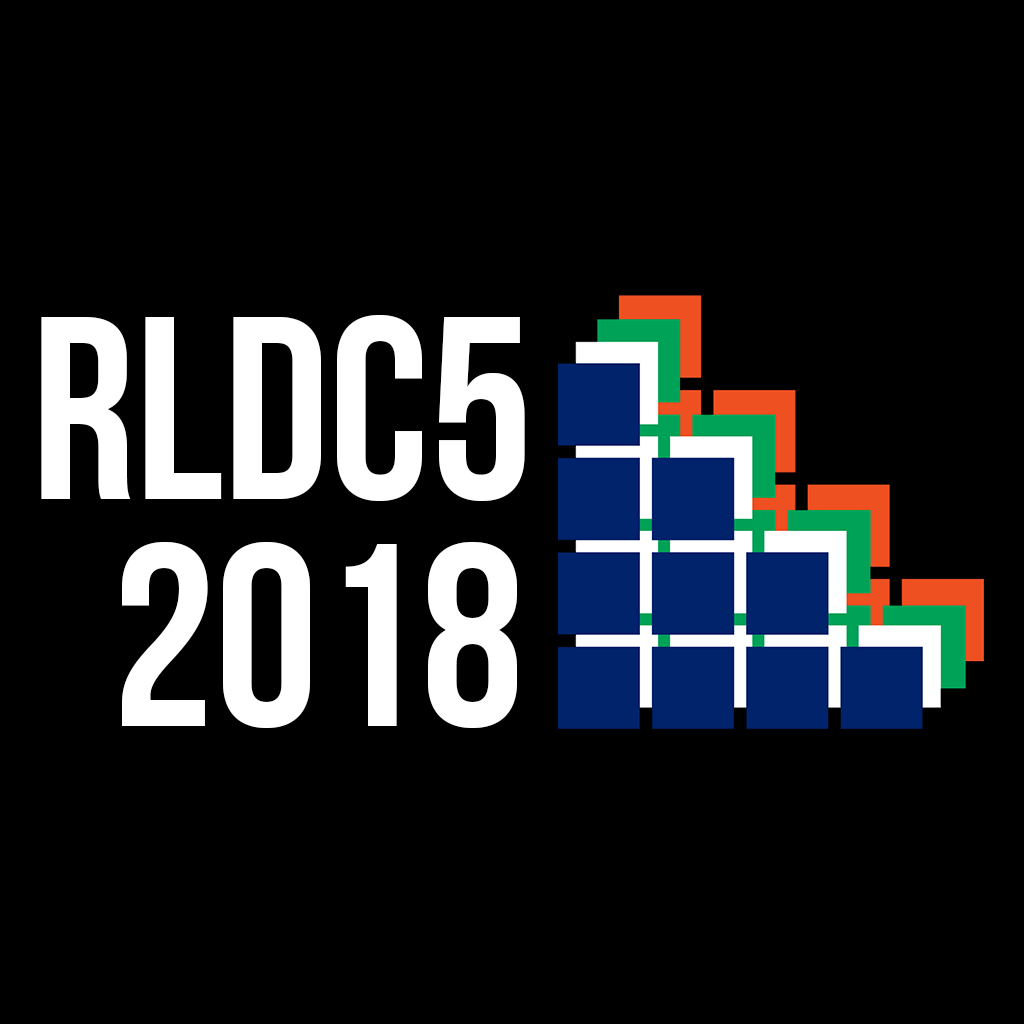
<style>
.page{position:relative;width:1024px;height:1024px;background:#000000}
.page>*{position:absolute;margin:0}
.t1{font:260.1px "BebasNeue";color:#ffffff}
</style>
<div class="page">
<p class="t1" style="left:41px;top:315px;width:484px;height:186px">rldc5</p>
<p class="t1" style="left:122px;top:542px;width:395px;height:186px">2018</p>
</div>
